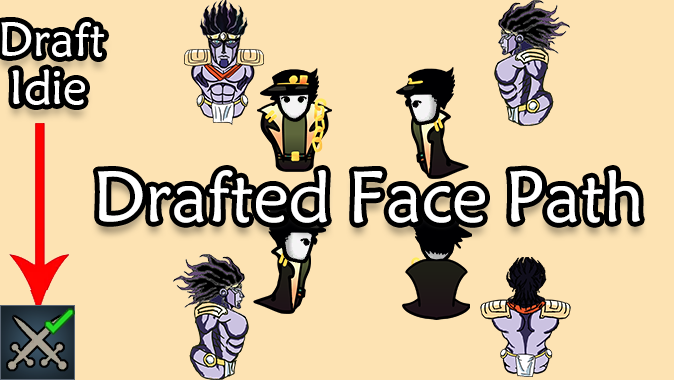
<style>
.page{position:relative;width:674px;height:380px;background:#fde3b3}
.page>*{position:absolute;margin:0}
.t1{font:48px/48px "STXinwei";color:#ffffff}
.t2{font:72px "STXinwei";color:#ffffff}
</style>
<div class="page">
<p class="t1" style="left:1px;top:22px;width:104px;height:83px">Draft <br> Idie</p>
<p class="t2" style="left:97px;top:170px;width:543px;height:53px">Drafted Face Path</p>
</div>
